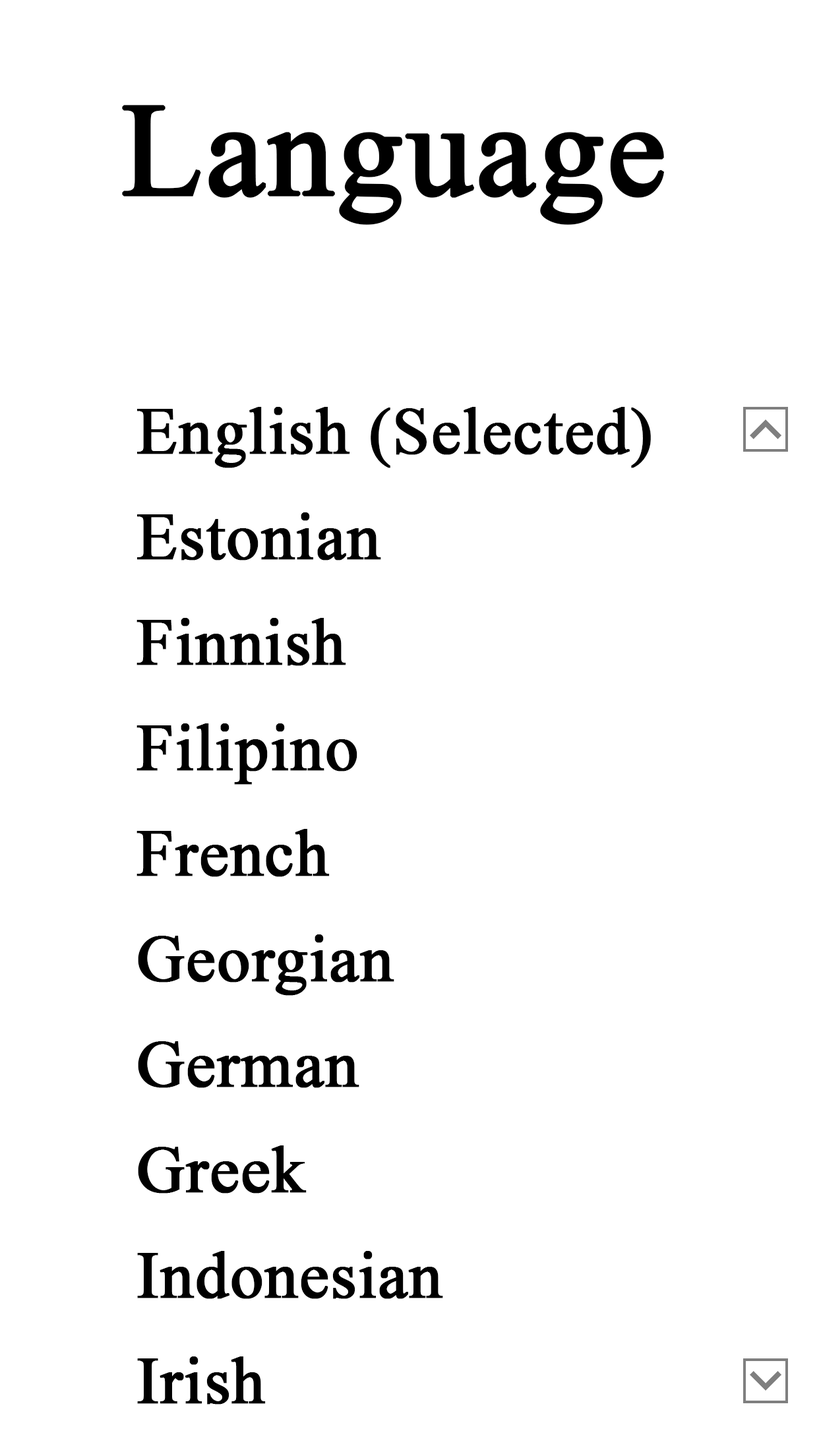
<style>
.page{position:relative;width:819px;height:1456px;background:#ffffff}
.page>*{position:absolute;margin:0}
.t1{font:131.9px "TimesNewRomanPSMT";color:#000000;font-weight:bold}
.t2{font:65.9px/105.5px "TimesNewRomanPSMT";color:#000000;font-weight:bold}
</style>
<div class="page">
<p class="t1" style="left:122px;top:105px;width:543px;height:120px">Language</p>
<p class="t2" style="left:136px;top:407px;width:515px;height:998px">English (Selected)<br>Estonian<br>Finnish<br>Filipino<br>French<br>Georgian<br>German<br>Greek<br>Indonesian<br>Irish</p>
</div>
